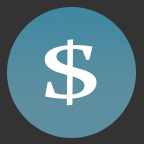
<style>
.page{position:relative;width:144px;height:144px;background:#333333}
.page>*{position:absolute;margin:0}
.t1{font:100.4px "Constantia";color:#fefefe;scale:1.42 1}
</style>
<div class="page">
<p class="t1" style="left:44px;top:39px;width:53px;height:67px;rotate:-1deg">$</p>
</div>
